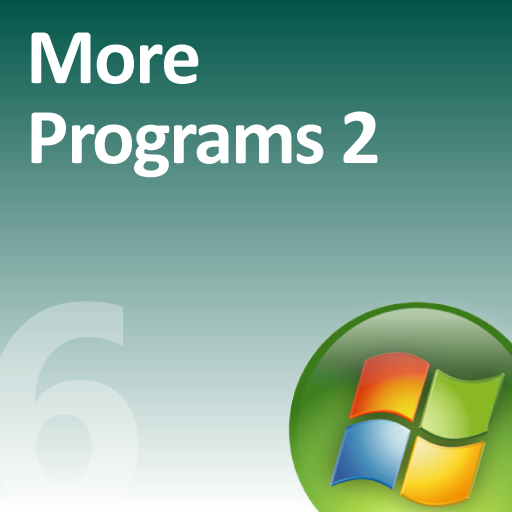
<style>
.page{position:relative;width:512px;height:512px}
.page>*{position:absolute;margin:0}
.t1{font:80px/80px "Calibri-Bold";letter-spacing:-0.025em;color:#ffffff}
</style>
<div class="page">
<p class="t1" style="left:31px;top:32px;width:347px;height:146px">More<br>Programs 2</p>
</div>
